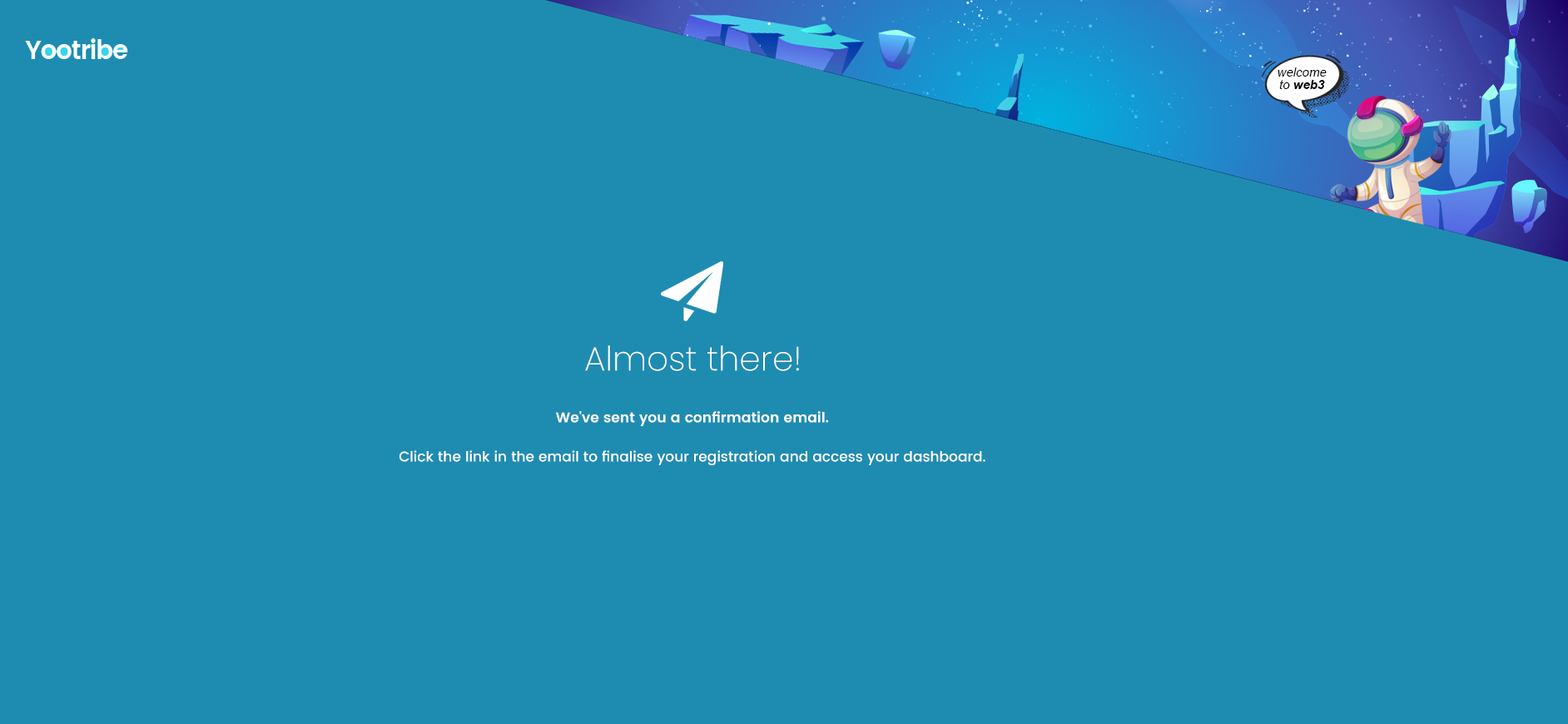
<style>
.page{position:relative;width:1568px;height:724px;background:#1e8cb1}
.page>*{position:absolute;margin:0}
.t1{font:33.8px "Poppins-ExtraLight";color:#ffffff}
.t2{font:14.1px/39.1px "Poppins-Medium";color:#ffffff}
.t3{font:14.1px/39.1px "Poppins-SemiBold";color:#ffffff}
</style>
<div class="page">
<p class="t1" style="left:585px;top:345px;width:214px;height:26px">Almost there!</p>
<p class="t2" style="left:399px;top:411px;width:586px;height:55px;text-align:center"><span class="t3">We've sent you a confirmation email.<br></span>Click the link in the email to finalise your registration and access your dashboard.</p>
</div>
